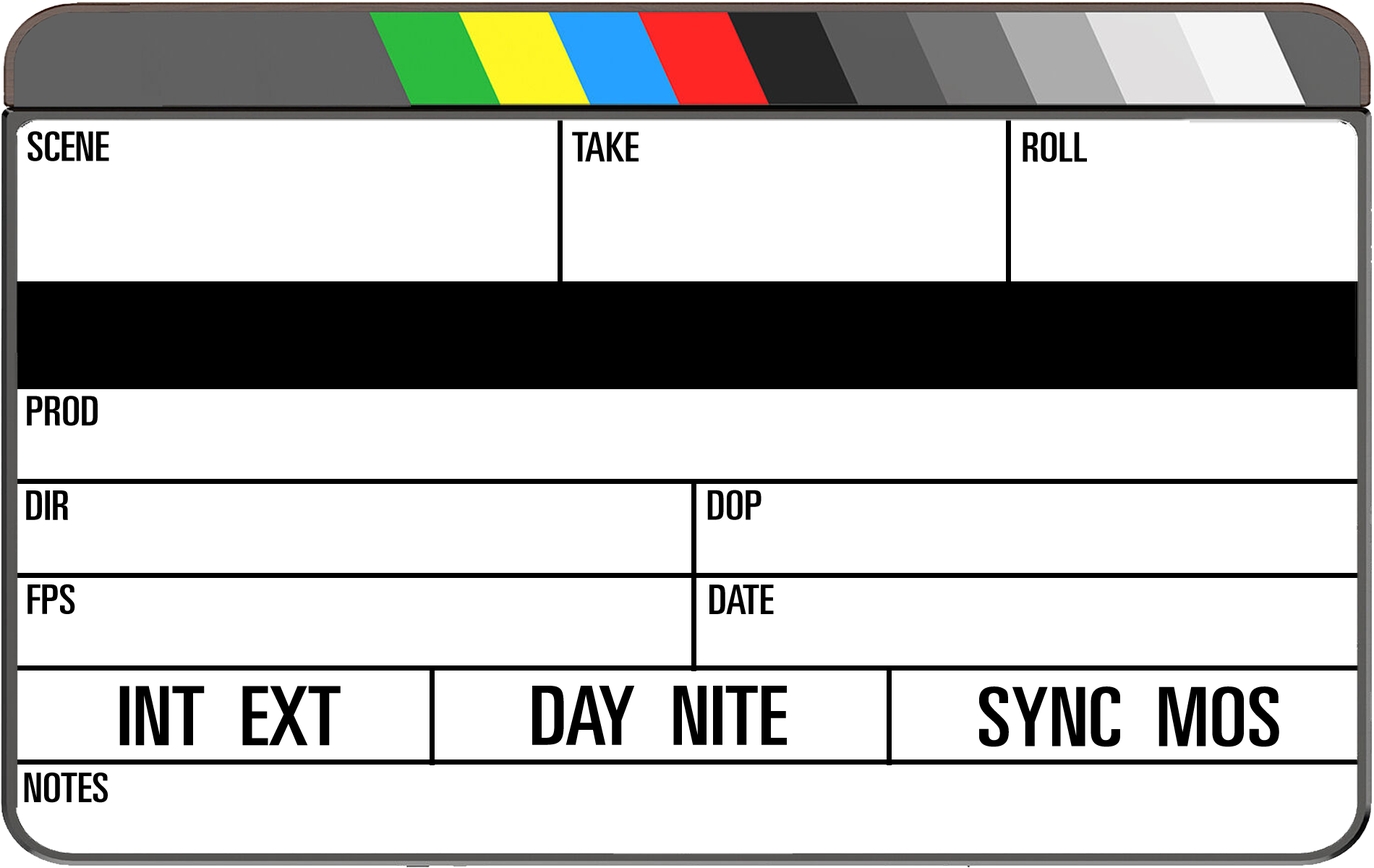
<style>
.page{position:relative;width:1374px;height:868px;background:#ffffff}
.page>*{position:absolute;margin:0}
.t1{font:40.8px "Univers-UltraCondensed";color:#000000;scale:1.14 1}
.t2{font:81.7px "Univers-UltraCondensed";color:#000000;scale:1.14 1}
</style>
<div class="page">
<p class="t1" style="left:27px;top:131px;width:82px;height:30px">SCENE</p>
<p class="t1" style="left:572px;top:132px;width:67px;height:30px">TAKE</p>
<p class="t1" style="left:1023px;top:132px;width:64px;height:30px">ROLL</p>
<p class="t1" style="left:27px;top:396px;width:71px;height:30px">PROD</p>
<p class="t1" style="left:26px;top:490px;width:42px;height:30px">DIR</p>
<p class="t1" style="left:707px;top:490px;width:55px;height:30px">DOP</p>
<p class="t1" style="left:27px;top:584px;width:48px;height:30px">FPS</p>
<p class="t1" style="left:709px;top:584px;width:65px;height:30px">DATE</p>
<p class="t2" style="left:119px;top:686px;width:222px;height:60px">INT  EXT</p>
<p class="t2" style="left:532px;top:686px;width:255px;height:59px">DAY  NITE</p>
<p class="t2" style="left:979px;top:686px;width:300px;height:61px">SYNC  MOS</p>
<p class="t1" style="left:24px;top:772px;width:84px;height:31px">NOTES</p>
</div>
